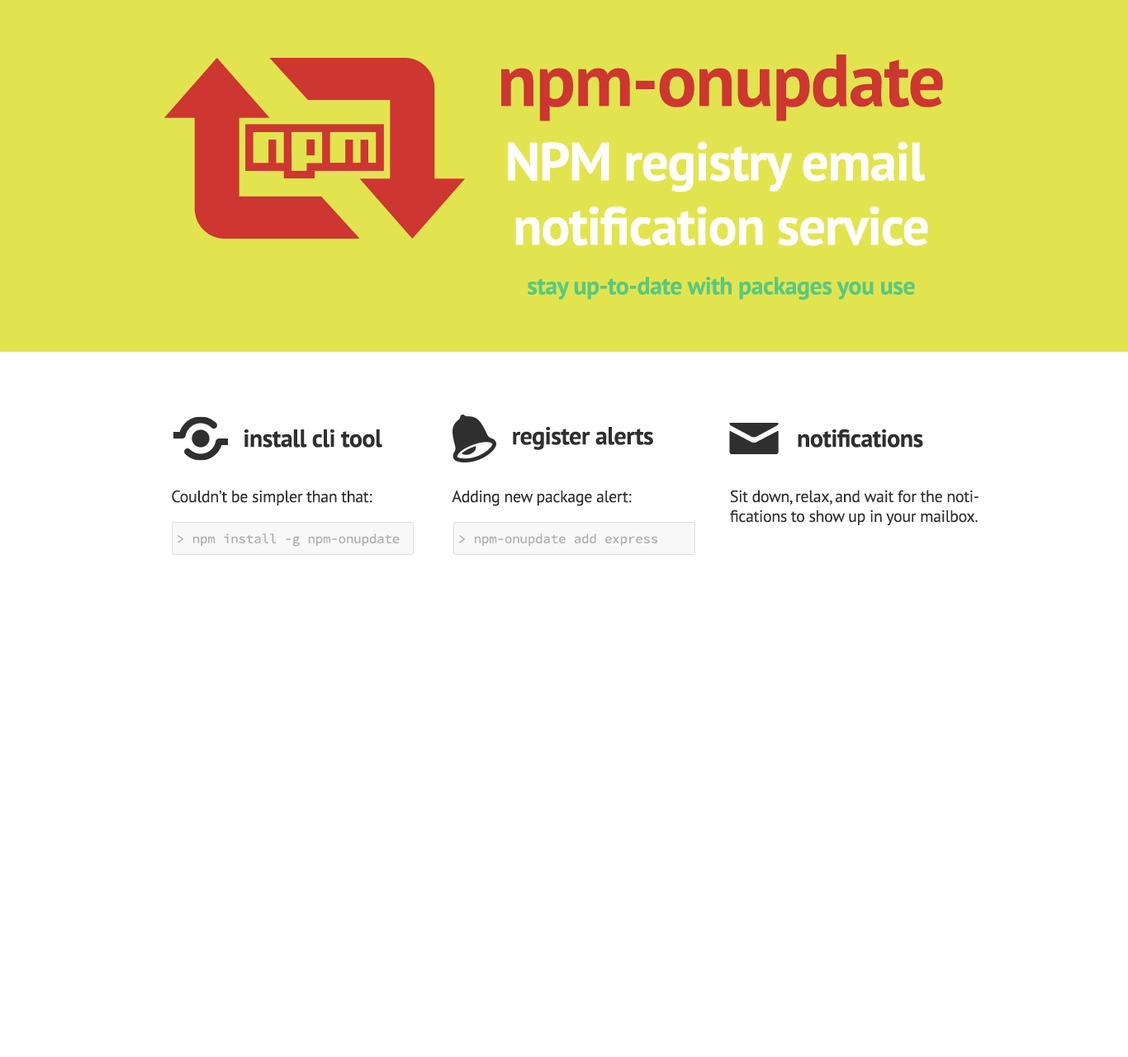
<style>
.page{position:relative;width:1128px;height:1057px;background:#ffffff}
.page>*{position:absolute;margin:0}
.t1{font:24.8px/49.5px "PTSans-Bold";letter-spacing:-0.018em;color:#58c97e}
.t2{font:73.5px "PTSans-Bold";letter-spacing:-0.018em;color:#cd3631}
.t3{font:53.7px/74.3px "PTSans-Bold";letter-spacing:-0.018em;color:#ffffff}
.t4{font:53.7px "PTSans-Bold";letter-spacing:-0.018em;color:#ffffff}
.t5{font:24.8px "PTSans-Bold";letter-spacing:-0.018em;color:#2f2f2f}
.t6{font:16.5px "PTSans-Regular";letter-spacing:-0.018em;color:#2f2f2f}
.t7{font:13.2px "SourceCodePro-Regular";letter-spacing:-0.018em;color:#adadad}
</style>
<div class="page">
<p class="t1" style="left:501px;top:55px;width:442px;height:245px;text-align:center"><span class="t2">npm-onupdate<br></span><span class="t3">NPM registry email <br></span><span class="t4">notification service<br></span>stay up-to-date with packages you use</p>
<p class="t5" style="left:244px;top:429px;width:138px;height:19px">install cli tool</p>
<p class="t5" style="left:513px;top:426px;width:140px;height:24px">register alerts</p>
<p class="t5" style="left:798px;top:429px;width:125px;height:19px">notifications</p>
<p class="t6" style="left:172px;top:490px;width:200px;height:16px">Couldn’t be simpler than that:</p>
<p class="t6" style="left:452px;top:490px;width:180px;height:16px">Adding new package alert:</p>
<p class="t6" style="left:730px;top:490px;width:249px;height:36px">Sit down, relax, and wait for the notifications to show up in your mailbox.</p>
<p class="t7" style="left:178px;top:533px;width:222px;height:14px">&gt; npm install -g npm-onupdate</p>
<p class="t7" style="left:459px;top:533px;width:199px;height:13px">&gt; npm-onupdate add express</p>
</div>
